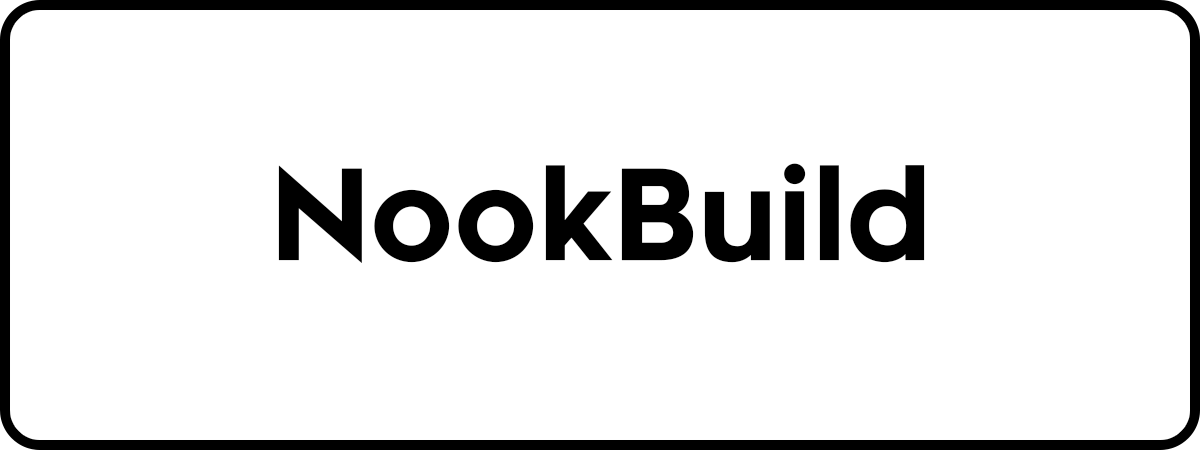
<style>
.page{position:relative;width:1200px;height:450px;background:#ffffff}
.page>*{position:absolute;margin:0}
.t1{font:125px "Renogare-Regular";letter-spacing:-0.05em;color:#000000;font-weight:bold}
</style>
<div class="page">
<p class="t1" style="left:278px;top:163px;width:647px;height:100px">NookBuild</p>
</div>
